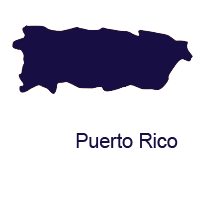
<style>
.page{position:relative;width:200px;height:200px;background:#ffffff}
.page>*{position:absolute;margin:0}
.t1{font:20.8px "ArialMT";color:#170f44;scale:0.94 1}
</style>
<div class="page">
<p class="t1" style="left:76px;top:133px;width:102px;height:15px">Puerto Rico</p>
</div>
